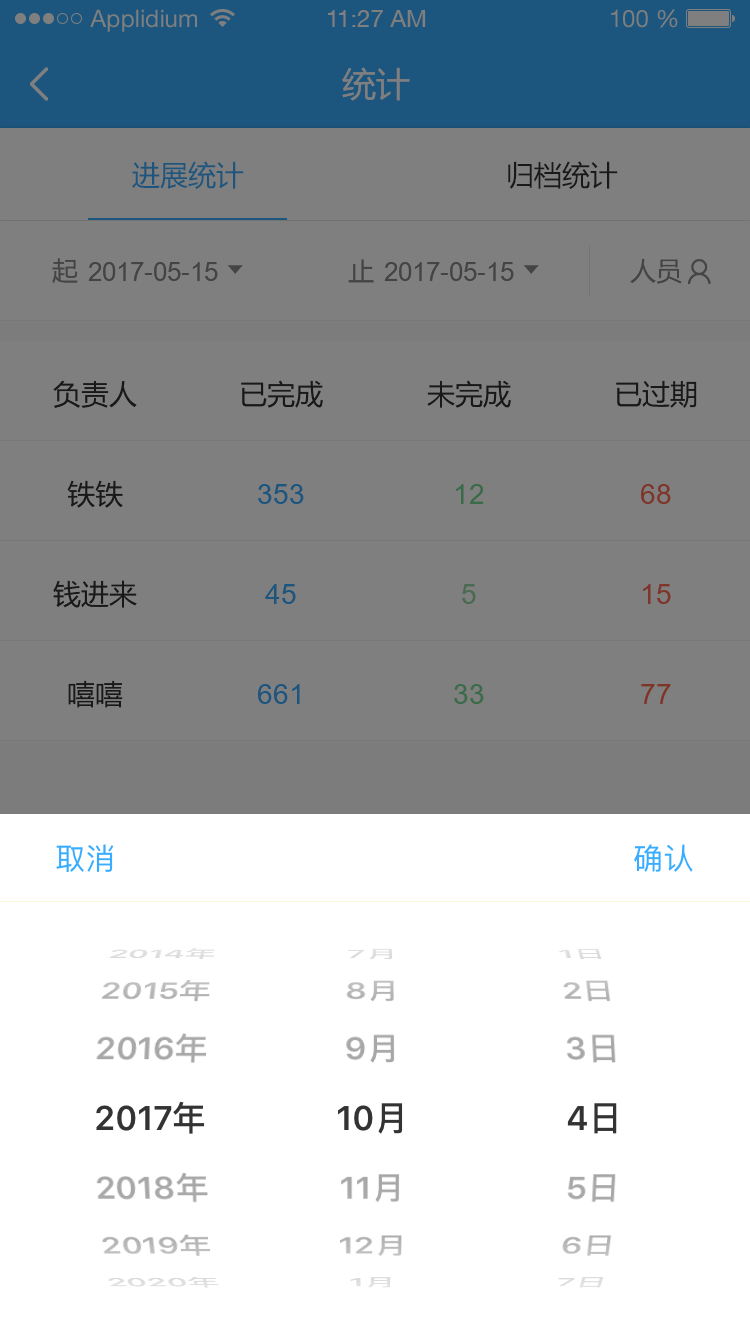
<style>
.page{position:relative;width:750px;height:1334px;background:#7f7f7f}
.page>*{position:absolute;margin:0}
.t1{font:24px "HelveticaNeueLTStd-Roman";color:#7f7f7f}
.t2{font:24px "HelveticaNeueCE-Roman";color:#7f7f7f}
.t3{font:34px "MicrosoftYaHei";color:#7f7f7f}
.t4{font:28px "MicrosoftYaHei";color:#1c567f}
.t5{font:28px "MicrosoftYaHei";color:#191919}
.t6{font:26px "MicrosoftYaHei";color:#444444}
.t7{font:26px "ArialMT";color:#444444}
.t8{font:28px "ArialMT";color:#1c567f}
.t9{font:28px "ArialMT";color:#3b6c49}
.t10{font:28px "ArialMT";color:#7e362b}
.t11{font:28px "ArialMT";color:#496b52}
</style>
<div class="page">
<p class="t1" style="left:90px;top:9px;width:107px;height:23px">Applidium</p>
<p class="t2" style="left:328px;top:10px;width:98px;height:17px">11:27 AM</p>
<p class="t1" style="left:611px;top:9px;width:67px;height:19px">100 %</p>
<p class="t3" style="left:342px;top:67px;width:68px;height:34px">统计</p>
<p class="t4" style="left:132px;top:161px;width:112px;height:28px">进展统计</p>
<p class="t5" style="left:508px;top:161px;width:110px;height:28px">归档统计</p>
<p class="t6" style="left:52px;top:258px;width:26px;height:26px">起</p>
<p class="t7" style="left:88px;top:262px;width:130px;height:19px">2017-05-15</p>
<p class="t6" style="left:348px;top:259px;width:26px;height:24px">止</p>
<p class="t7" style="left:384px;top:262px;width:130px;height:19px">2017-05-15</p>
<p class="t6" style="left:630px;top:258px;width:52px;height:26px">人员</p>
<p class="t5" style="left:53px;top:380px;width:84px;height:28px">负责人</p>
<p class="t5" style="left:241px;top:380px;width:82px;height:28px">已完成</p>
<p class="t5" style="left:427px;top:380px;width:84px;height:28px">未完成</p>
<p class="t5" style="left:616px;top:380px;width:81px;height:28px">已过期</p>
<p class="t5" style="left:67px;top:480px;width:56px;height:28px">铁铁</p>
<p class="t8" style="left:258px;top:484px;width:46px;height:20px">353</p>
<p class="t9" style="left:456px;top:484px;width:28px;height:20px">12</p>
<p class="t10" style="left:641px;top:484px;width:30px;height:20px">68</p>
<p class="t5" style="left:53px;top:580px;width:84px;height:28px">钱进来</p>
<p class="t8" style="left:265px;top:584px;width:31px;height:20px">45</p>
<p class="t11" style="left:462px;top:584px;width:14px;height:20px">5</p>
<p class="t10" style="left:643px;top:584px;width:28px;height:20px">15</p>
<p class="t5" style="left:68px;top:680px;width:55px;height:28px">嘻嘻</p>
<p class="t8" style="left:258px;top:684px;width:42px;height:20px">661</p>
<p class="t9" style="left:454px;top:684px;width:30px;height:20px">33</p>
<p class="t10" style="left:641px;top:684px;width:30px;height:20px">77</p>
</div>
